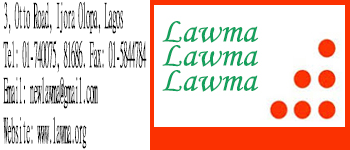
<style>
.page{position:relative;width:350px;height:150px;background:#ffffff}
.page>*{position:absolute;margin:0}
.t1{font:35.5px "MingLiU-ExtB";letter-spacing:-0.06em;color:#000000;scale:0.24 1}
</style>
<div class="page">
<p class="t1" style="left:4px;top:1px;width:119px;height:33px">3, Otto Road, Ijora Olopa, Lagos</p>
<p class="t1" style="left:3px;top:40px;width:144px;height:33px">Tel: 01-740075, 81686. Fax: 01-5844784</p>
<p class="t1" style="left:3px;top:76px;width:95px;height:33px">Email: newlawma@gmail.com</p>
<p class="t1" style="left:3px;top:116px;width:84px;height:33px">Website: www.lawma.org</p>
</div>
